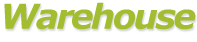
<style>
.page{position:relative;width:197px;height:42px;background:#ffffff}
.page>*{position:absolute;margin:0}
.t1{font:34.4px "Verdana-BoldItalic";letter-spacing:-0.075em;color:#a2bd30}
</style>
<div class="page">
<p class="t1" style="left:4px;top:2px;width:192px;height:28px">Warehouse</p>
</div>
